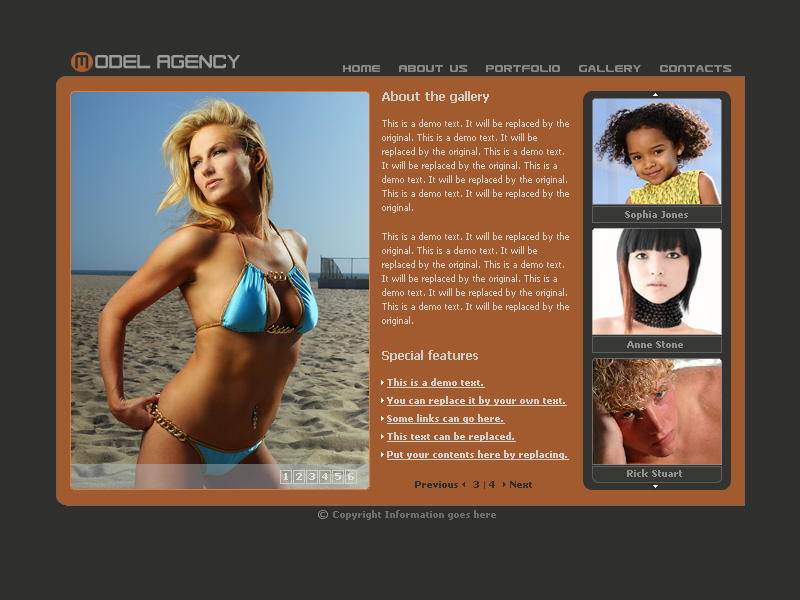
<style>
.page{position:relative;width:800px;height:600px;background:#2f2f2e}
.page>*{position:absolute;margin:0}
.t1{font:12px "Usuzi";color:#888885}
.t2{font:12px "Tahoma-Bold";color:#cecec2}
.t3{font:9px/14px "Tahoma";color:#d0d0c9}
.t4{font:10px "Tahoma-Bold";color:#90908e}
.t5{font:9px/18px "Tahoma-Bold";color:#d0d0c9;text-decoration:underline}
.t6{font:9px "Tahoma-Bold";color:#e2e0e0}
.t7{font:9px "Tahoma-Bold";color:#2f2f2e}
.t8{font:9px "Tahoma-Bold";color:#6c6c69}
</style>
<div class="page">
<p class="t1" style="left:343px;top:65px;width:389px;height:7px">Home   About us   Portfolio   Gallery   Contacts</p>
<p class="t2" style="left:382px;top:91px;width:107px;height:12px">About the gallery</p>
<p class="t3" style="left:382px;top:119px;width:187px;height:94px">This is a demo text. It will be replaced by the original. This is a demo text. It will be replaced by the original. This is a demo text. It will be replaced by the original. This is a demo text. It will be replaced by the original. This is a demo text. It will be replaced by the original.</p>
<p class="t4" style="left:625px;top:210px;width:63px;height:10px">Sophia Jones</p>
<p class="t3" style="left:382px;top:232px;width:187px;height:94px">This is a demo text. It will be replaced by the original. This is a demo text. It will be replaced by the original. This is a demo text. It will be replaced by the original. This is a demo text. It will be replaced by the original. This is a demo text. It will be replaced by the original.</p>
<p class="t4" style="left:627px;top:341px;width:56px;height:7px">Anne Stone</p>
<p class="t2" style="left:382px;top:350px;width:96px;height:12px">Special features</p>
<p class="t5" style="left:387px;top:378px;width:182px;height:82px">This is a demo text.<br>You can replace it by your own text.<br>Some links can go here.<br>This text can be replaced.<br>Put your contents here by replacing.</p>
<p class="t6" style="left:284px;top:473px;width:70px;height:7px">1  2  3  4  5  6</p>
<p class="t4" style="left:627px;top:469px;width:55px;height:8px">Rick Stuart</p>
<p class="t7" style="left:415px;top:481px;width:117px;height:7px">Previous                 Next</p>
<p class="t7" style="left:473px;top:481px;width:22px;height:7px">3   4</p>
<p class="t8" style="left:333px;top:510px;width:163px;height:10px">Copyright Information goes here</p>
</div>
